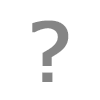
<style>
.page{position:relative;width:100px;height:100px;background:#ffffff}
.page>*{position:absolute;margin:0}
.t1{font:81.5px "Verdana";letter-spacing:0.2em;color:#858585;font-weight:bold}
</style>
<div class="page">
<p class="t1" style="left:32px;top:20px;width:37px;height:62px">?</p>
</div>
